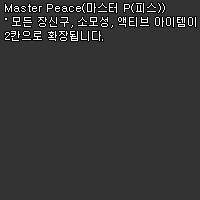
<style>
.page{position:relative;width:200px;height:200px;background:#333333}
.page>*{position:absolute;margin:0}
.t1{font:11px/14px "Dotum";color:#ffffff}
</style>
<div class="page">
<p class="t1" style="left:5px;top:3px;width:191px;height:38px">Master Peace(마스터 P(피스))<br>˚ 모든 장신구, 소모성, 액티브 아이템이 <br>2칸으로 확장됩니다.</p>
</div>
